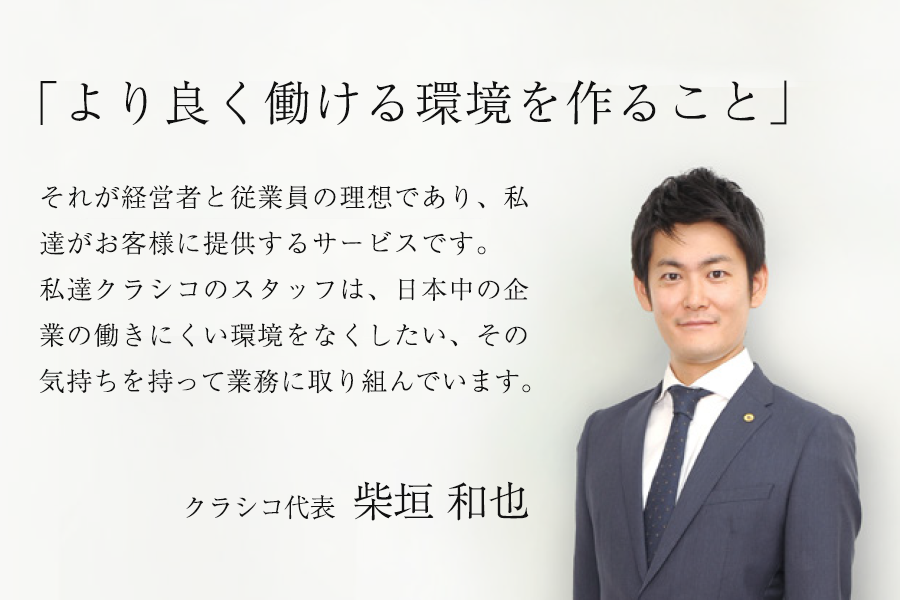
<style>
.page{position:relative;width:900px;height:600px}
.page>*{position:absolute;margin:0}
.t1{font:48px "RyuminPr6N-Light";letter-spacing:0.05em;color:#111111;text-transform:uppercase}
.t2{font:26px/46px "RyuminPr6N-Light";letter-spacing:0.05em;color:#111111;text-transform:uppercase}
.t3{font:26px/46px "RyuminPr6N-Light";letter-spacing:0.04em;color:#111111;text-transform:uppercase}
.t4{font:26px/46px "RyuminPr6N-Light";color:#111111;text-transform:uppercase}
.t5{font:26px/46px "RyuminPr6N-Light";letter-spacing:0.02em;color:#111111;text-transform:uppercase}
.t6{font:26px "RyuminPr6N-Light";letter-spacing:-0.025em;color:#111111;text-transform:uppercase}
.t7{font:42px "RyuminPr6N-Light";letter-spacing:-0.025em;color:#111111;text-transform:uppercase}
</style>
<div class="page">
<p class="t1" style="left:40px;top:80px;width:747px;height:45px">「より良く働ける環境を作ること」</p>
<p class="t2" style="left:39px;top:185px;width:492px;height:209px">それが経営者と従業員の理想であり、私<br>達がお客様に提供するサービスです。<br>私達クラシコのスタッフは、日本中の企<br>業の働きにくい環境をなくしたい、その<br><span class="t3">気持ちを持</span><span class="t4">って</span><span class="t3">業務に取り組</span><span class="t5">んでいま</span><span class="t4">す</span>。</p>
<p class="t6" style="left:186px;top:481px;width:343px;height:40px">クラシコ代表　<span class="t7">柴垣 和也</span></p>
</div>
